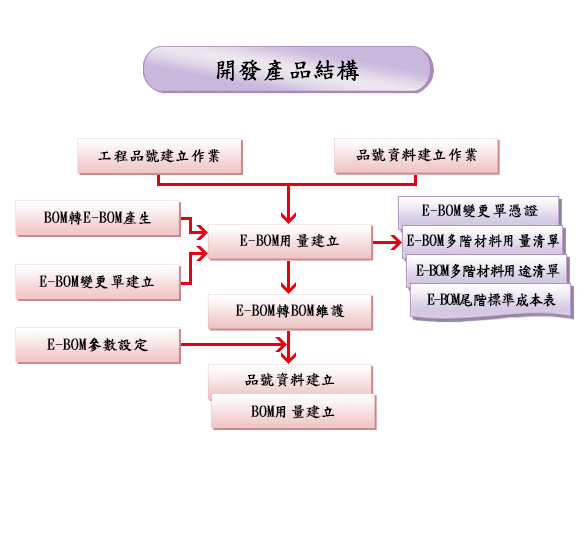
<style>
.page{position:relative;width:577px;height:545px;background:#ffffff}
.page>*{position:absolute;margin:0}
.t1{font:24px "DFKaiShu-SB-Estd-BF";color:#000000;font-weight:bold}
.t2{font:15px "DFKaiShu-SB-Estd-BF";color:#000000;font-weight:bold}
.t3{font:15px "DFKaiShu-SB-Estd-BF";color:#000000;font-weight:bold;scale:0.95 1}
.t4{font:15px "DFKaiShu-SB-Estd-BF";letter-spacing:-0.1em;color:#000000;font-weight:bold}
</style>
<div class="page">
<p class="t1" style="left:216px;top:59px;width:144px;height:22px">開發產品結構</p>
<p class="t2" style="left:98px;top:148px;width:122px;height:15px">工程品號建立作業</p>
<p class="t2" style="left:356px;top:147px;width:121px;height:15px">品號資料建立作業</p>
<p class="t2" style="left:422px;top:203px;width:116px;height:15px">E-BOM變更單憑證</p>
<p class="t2" style="left:44px;top:211px;width:107px;height:14px">BOM轉E-BOM產生</p>
<p class="t3" style="left:406px;top:233px;width:154px;height:15px">E-BOM多階材料用量清單</p>
<p class="t2" style="left:240px;top:234px;width:99px;height:14px">E-BOM用量建立</p>
<p class="t4" style="left:416px;top:263px;width:144px;height:15px">E-BOM多階材料用途清單</p>
<p class="t2" style="left:39px;top:274px;width:115px;height:15px">E-BOM變更單建立</p>
<p class="t4" style="left:427px;top:293px;width:129px;height:14px">E-BOM尾階標準成本表</p>
<p class="t2" style="left:236px;top:304px;width:109px;height:14px">E-BOM轉BOM維護</p>
<p class="t2" style="left:47px;top:337px;width:101px;height:15px">E-BOM參數設定</p>
<p class="t2" style="left:245px;top:372px;width:90px;height:15px">品號資料建立</p>
<p class="t2" style="left:251px;top:405px;width:84px;height:14px">BOM用量建立</p>
</div>
